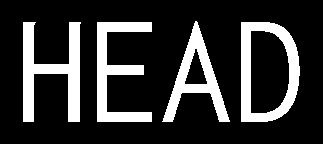
<style>
.page{position:relative;width:323px;height:144px;background:#000000}
.page>*{position:absolute;margin:0}
.t1{font:160.7px "InconsolataSemiCondensed-Regular";color:#ffffff}
</style>
<div class="page">
<p class="t1" style="left:23px;top:21px;width:277px;height:101px">HEAD</p>
</div>
